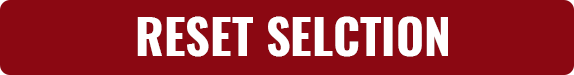
<style>
.page{position:relative;width:574px;height:75px;background:#8b0812}
.page>*{position:absolute;margin:0}
.t1{font:48.1px "Oswald-Bold";color:#ffffff}
</style>
<div class="page">
<p class="t1" style="left:137px;top:16px;width:311px;height:41px">RESET SELCTION</p>
</div>
